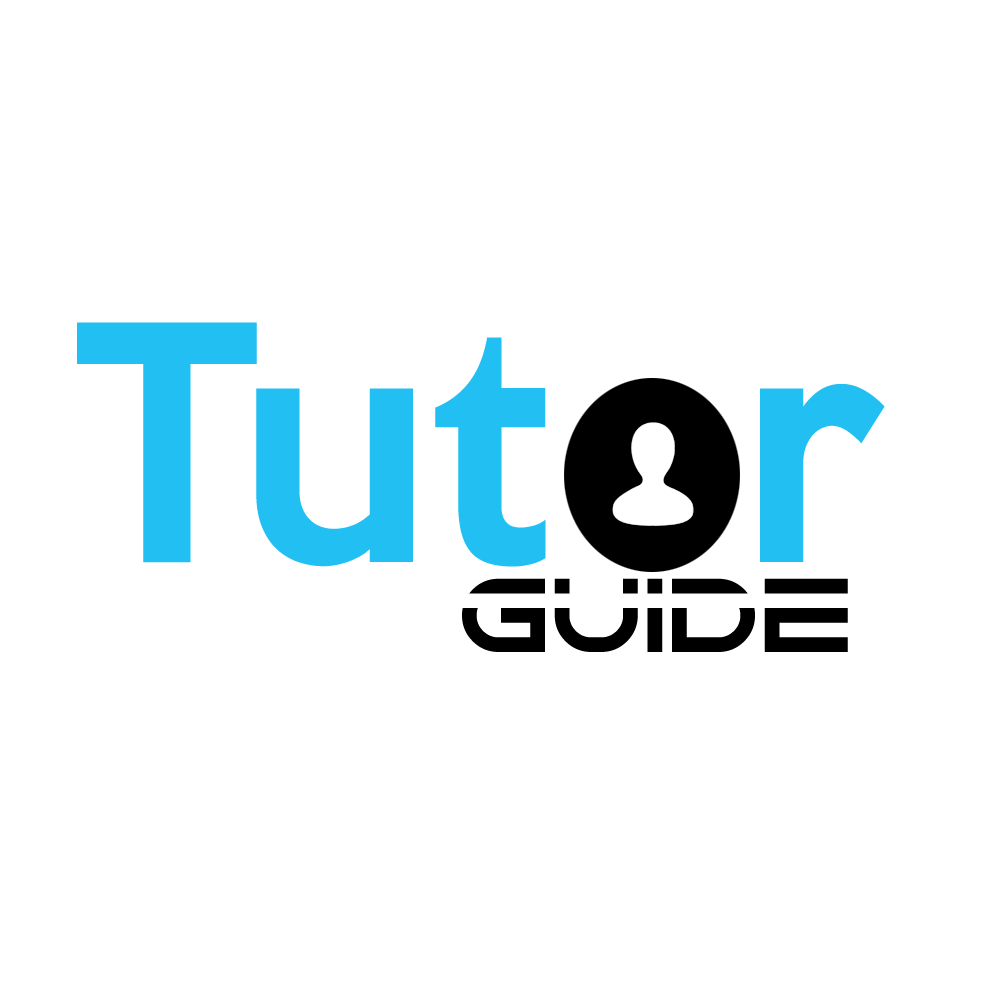
<style>
.page{position:relative;width:1000px;height:1000px;background:#ffffff}
.page>*{position:absolute;margin:0}
.t1{font:300px "KeepCalm-Medium";color:#22bff3}
.t2{font:100px "Speedeasy";color:#000000}
</style>
<div class="page">
<p class="t1" style="left:77px;top:322px;width:808px;height:245px">Tut  r</p>
<p class="t2" style="left:462px;top:578px;width:386px;height:74px">GUIDE</p>
</div>
